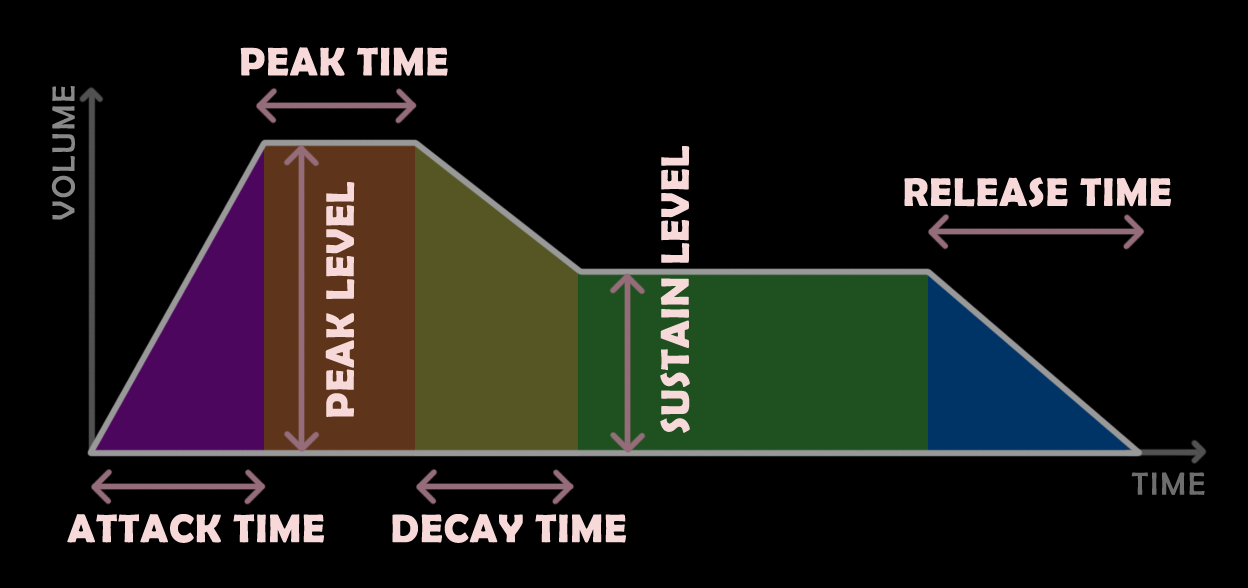
<style>
.page{position:relative;width:1248px;height:588px;background:#000000}
.page>*{position:absolute;margin:0}
.t1{font:40px "BerlinSansFBDemi-Bold";letter-spacing:0.025em;color:#f8d9d9}
.t2{font:32px "BerlinSansFB-Reg";letter-spacing:0.075em;color:#888888}
.t3{font:32px "BerlinSansFB-Reg";letter-spacing:0.075em;color:#6d6d6d}
</style>
<div class="page">
<p class="t1" style="left:240px;top:47px;width:208px;height:29px">PEAK TIME</p>
<p class="t2" style="left:51px;top:86px;width:24px;height:134px;rotate:-90deg">VOLUME</p>
<p class="t1" style="left:660px;top:146px;width:30px;height:287px;rotate:-90deg">SUSTAIN LEVEL</p>
<p class="t1" style="left:325px;top:182px;width:30px;height:235px;rotate:-90deg">PEAK LEVEL</p>
<p class="t1" style="left:904px;top:177px;width:267px;height:30px">RELEASE TIME</p>
<p class="t3" style="left:1131px;top:472px;width:74px;height:23px">TIME</p>
<p class="t1" style="left:67px;top:514px;width:257px;height:29px">ATTACK TIME</p>
<p class="t1" style="left:392px;top:514px;width:234px;height:29px">DECAY TIME</p>
</div>
